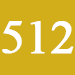
<style>
.page{position:relative;width:75px;height:75px;background:#d3ae1b}
.page>*{position:absolute;margin:0}
.t1{font:48px "TimesNewRomanPSMT";color:#ffffff;font-weight:bold}
</style>
<div class="page">
<p class="t1" style="left:2px;top:21px;width:72px;height:33px">512</p>
</div>
